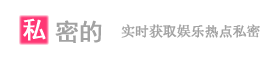
<style>
.page{position:relative;width:260px;height:60px;background:#ffffff}
.page>*{position:absolute;margin:0}
.t1{font:24px "SimHei";letter-spacing:-0.03em;color:#ffffff;font-weight:bold}
.t2{font:24px "SimHei";letter-spacing:-0.03em;color:#a2a2a2;font-weight:bold}
.t3{font:14px "NSimSun";letter-spacing:-0.03em;color:#a2a2a2;font-weight:bold}
</style>
<div class="page">
<p class="t1" style="left:23px;top:18px;width:23px;height:23px">私</p>
<p class="t2" style="left:55px;top:20px;width:47px;height:23px">密的</p>
<p class="t3" style="left:121px;top:24px;width:139px;height:14px">实时获取娱乐热点私密</p>
</div>
